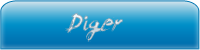
<style>
.page{position:relative;width:200px;height:50px}
.page>*{position:absolute;margin:0}
.t1{font:23px "LeviBrush";font-style:italic}
</style>
<div class="page">
<p class="t1" style="left:65px;top:12px;width:58px;height:30px">Diger</p>
</div>
